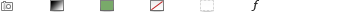
<style>
.page{position:relative;width:344px;height:12px;background:#ffffff}
.page>*{position:absolute;margin:0}
.t1{font:11.3px "Georgia-Italic";color:#2f2f2f}
</style>
<div class="page">
<p class="t1" style="left:251px;top:0px;width:8px;height:11px">f</p>
</div>
